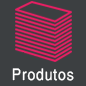
<style>
.page{position:relative;width:86px;height:86px;background:#3c3f41}
.page>*{position:absolute;margin:0}
.t1{font:15.6px "Helvetica-Normal";letter-spacing:0.06em;color:#ffffff;scale:0.89 1}
</style>
<div class="page">
<p class="t1" style="left:12px;top:68px;width:62px;height:13px">Produtos</p>
</div>
